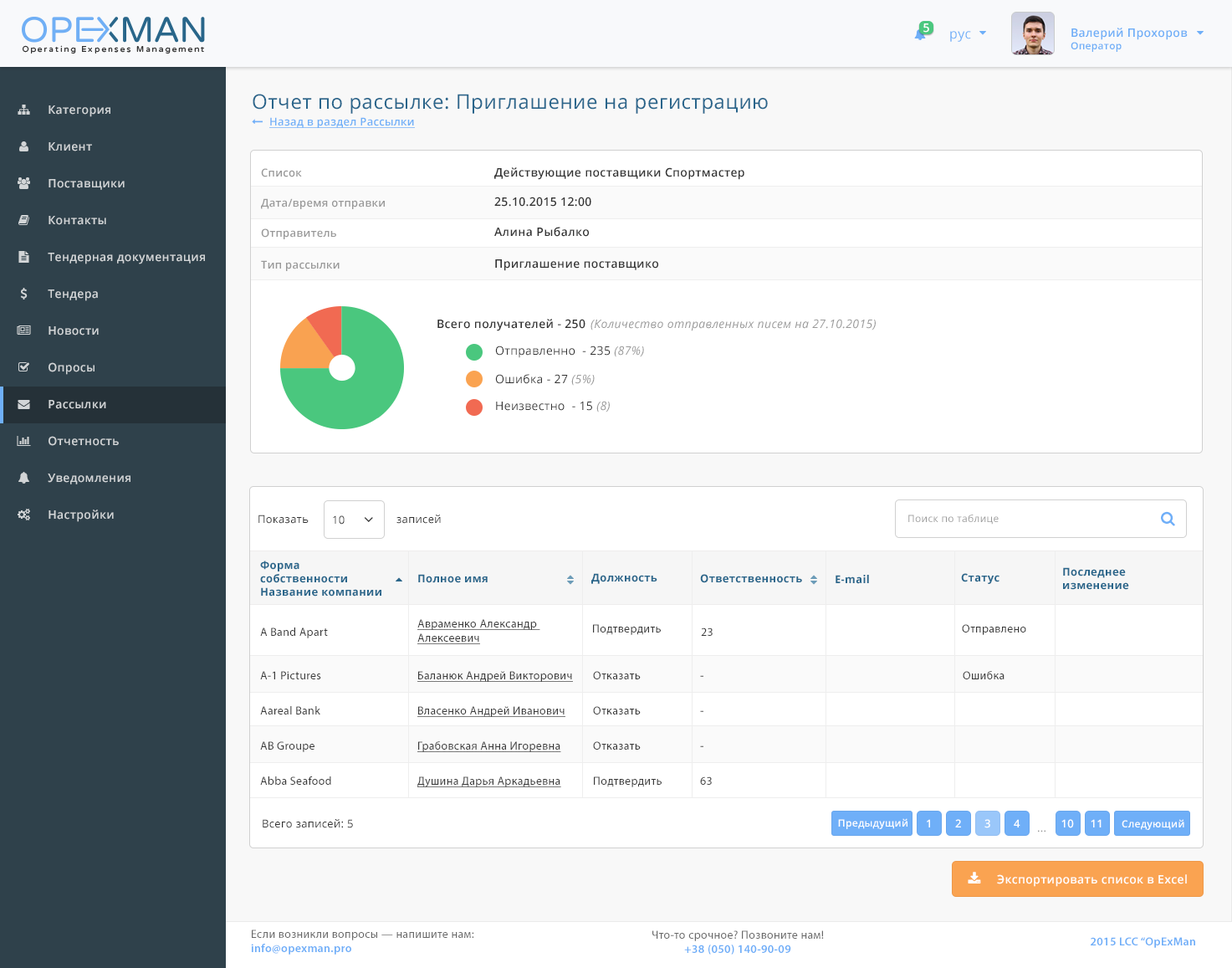
<style>
.page{position:relative;width:1232px;height:968px;background:#ffffff}
.page>*{position:absolute;margin:0}
.t1{font:11.7px "OpenSans-Semibold";letter-spacing:0.025em;color:#ffffff}
.t2{font:11.7px "OpenSans-Semibold";letter-spacing:0.025em;color:#6eaef7}
.t3{font:10px "OpenSans-Semibold";letter-spacing:0.025em;color:#6eaef7}
.t4{font:13.3px "OpenSans";letter-spacing:0.025em;color:#6eaff8}
.t5{font:20.1px "OpenSans";letter-spacing:0.025em;color:#29658b}
.t6{font:11.7px "OpenSans-Semibold";letter-spacing:0.025em;color:#d2d5d7}
.t7{font:10.9px "OpenSans-Semibold";letter-spacing:0.025em;color:#6faff8;text-decoration:underline}
.t8{font:10.9px "OpenSans-Semibold";letter-spacing:0.025em;color:#999999}
.t9{font:11.7px "OpenSans-Semibold";letter-spacing:0.025em;color:#333333}
.t10{font:11.7px "OpenSans-Italic";letter-spacing:0.025em;color:#999999}
.t11{font:11.7px "OpenSans";letter-spacing:0.025em;color:#333333}
.t12{font:10.9px "OpenSans";letter-spacing:0.025em;color:#333333}
.t13{font:10px "OpenSans";letter-spacing:0.025em;color:#999999}
.t14{font:10.9px "OpenSans-Bold";letter-spacing:0.025em;color:#29668b}
.t15{font:11.7px "MyriadPro-Regular";letter-spacing:0.025em;color:#3a3a3a}
.t16{font:11.7px "MyriadPro-Regular";letter-spacing:0.025em;color:#3a3a3a;text-decoration:underline}
.t17{font:11.7px "MyriadPro-Regular";letter-spacing:0.025em}
.t18{font:10px "OpenSans-Semibold";letter-spacing:0.025em;color:#ffffff}
.t19{font:10.8px "OpenSans-Semibold";letter-spacing:0.025em;color:#ffffff}
.t20{font:10.8px "OpenSans";letter-spacing:0.025em;color:#999999}
.t21{font:11.7px "MyriadPro-Regular";letter-spacing:0.025em;color:#696969}
.t22{font:11.7px "MyriadPro-Semibold";letter-spacing:0.025em;color:#6eaef8}
</style>
<div class="page">
<p class="t1" style="left:923px;top:23px;width:6px;height:10px">5</p>
<p class="t2" style="left:1071px;top:28px;width:117px;height:24px">Валерий Прохоров<br><span class="t3">Оператор</span></p>
<p class="t4" style="left:950px;top:31px;width:21px;height:11px">рус</p>
<p class="t5" style="left:253px;top:94px;width:515px;height:20px">Отчет по рассылке: Приглашение на регистрацию</p>
<p class="t6" style="left:49px;top:105px;width:61px;height:12px">Категория</p>
<p class="t7" style="left:269px;top:117px;width:146px;height:11px">Назад в раздел Рассылки</p>
<p class="t6" style="left:49px;top:142px;width:43px;height:9px">Клиент</p>
<p class="t8" style="left:261px;top:168px;width:41px;height:9px">Список</p>
<p class="t9" style="left:494px;top:167px;width:250px;height:13px">Действующие поставщики Спортмастер</p>
<p class="t6" style="left:49px;top:179px;width:76px;height:11px">Поставщики</p>
<p class="t9" style="left:494px;top:197px;width:97px;height:10px">25.10.2015 12:00</p>
<p class="t8" style="left:261px;top:198px;width:124px;height:11px">Дата/время отправки</p>
<p class="t6" style="left:49px;top:216px;width:57px;height:9px">Контакты</p>
<p class="t8" style="left:261px;top:228px;width:75px;height:11px">Отправитель</p>
<p class="t9" style="left:494px;top:227px;width:95px;height:10px">Алина Рыбалко</p>
<p class="t6" style="left:48px;top:253px;width:157px;height:11px">Тендерная документация</p>
<p class="t8" style="left:261px;top:260px;width:79px;height:11px">Тип рассылки</p>
<p class="t9" style="left:495px;top:259px;width:163px;height:12px">Приглашение поставщико</p>
<p class="t6" style="left:48px;top:289px;width:50px;height:12px">Тендера</p>
<p class="t6" style="left:49px;top:326px;width:50px;height:9px">Новости</p>
<p class="t9" style="left:437px;top:319px;width:149px;height:12px">Всего получателей - 250</p>
<p class="t10" style="left:591px;top:319px;width:285px;height:12px">(Количество отправленных писем на 27.10.2015)</p>
<p class="t11" style="left:495px;top:345px;width:149px;height:13px">Отправленно  - 235 <span class="t10">(87%)</span></p>
<p class="t6" style="left:49px;top:362px;width:46px;height:13px">Опросы</p>
<p class="t11" style="left:495px;top:374px;width:100px;height:12px">Ошибка - 27<span class="t10"> (5%)</span></p>
<p class="t6" style="left:49px;top:400px;width:57px;height:9px">Рассылки</p>
<p class="t11" style="left:496px;top:401px;width:114px;height:11px">Неизвестно  - 15 <span class="t10">(8)</span></p>
<p class="t6" style="left:49px;top:436px;width:70px;height:10px">Отчетность</p>
<p class="t6" style="left:48px;top:473px;width:82px;height:11px">Уведомления</p>
<p class="t6" style="left:49px;top:509px;width:65px;height:13px">Настройки</p>
<p class="t12" style="left:258px;top:514px;width:51px;height:10px">Показать</p>
<p class="t12" style="left:333px;top:515px;width:12px;height:9px">10</p>
<p class="t12" style="left:396px;top:514px;width:45px;height:10px">записей</p>
<p class="t13" style="left:908px;top:514px;width:91px;height:10px">Поиск по таблице</p>
<p class="t14" style="left:260px;top:560px;width:121px;height:36px">Форма <br>собственности<br>Название компании</p>
<p class="t14" style="left:1063px;top:567px;width:66px;height:23px">Последнее <br>изменение</p>
<p class="t14" style="left:418px;top:574px;width:70px;height:9px">Полное имя</p>
<p class="t14" style="left:591px;top:573px;width:66px;height:11px">Должность</p>
<p class="t14" style="left:700px;top:574px;width:102px;height:9px">Ответственность</p>
<p class="t14" style="left:836px;top:575px;width:33px;height:9px">E-mail</p>
<p class="t14" style="left:961px;top:573px;width:39px;height:11px">Статус</p>
<p class="t15" style="left:260px;top:627px;width:68px;height:11px">A Band Apart</p>
<p class="t16" style="left:417px;top:619px;width:123px;height:25px">Авраменко Александр <br>Алексеевич</p>
<p class="t15" style="left:593px;top:624px;width:68px;height:11px">Подтвердить</p>
<p class="t15" style="left:701px;top:627px;width:12px;height:9px">23</p>
<p class="t15" style="left:962px;top:624px;width:64px;height:11px">Отправлено</p>
<p class="t15" style="left:260px;top:671px;width:61px;height:8px">A-1 Pictures</p>
<p class="t16" style="left:417px;top:671px;width:156px;height:11px">Баланюк Андрей Викторович</p>
<p class="t15" style="left:593px;top:671px;width:48px;height:8px">Отказать</p>
<p class="t17" style="left:700px;top:675px;width:3px;height:2px">-</p>
<p class="t15" style="left:963px;top:671px;width:42px;height:8px">Ошибка</p>
<p class="t15" style="left:260px;top:706px;width:60px;height:8px">Aareal Bank</p>
<p class="t16" style="left:417px;top:706px;width:148px;height:11px">Власенко Андрей Иванович</p>
<p class="t15" style="left:593px;top:706px;width:48px;height:8px">Отказать</p>
<p class="t17" style="left:700px;top:710px;width:3px;height:2px">-</p>
<p class="t15" style="left:260px;top:741px;width:55px;height:11px">AB Groupe</p>
<p class="t16" style="left:417px;top:741px;width:144px;height:11px">Грабовская Анна Игоревна</p>
<p class="t15" style="left:593px;top:741px;width:48px;height:8px">Отказать</p>
<p class="t17" style="left:700px;top:745px;width:3px;height:2px">-</p>
<p class="t15" style="left:260px;top:776px;width:71px;height:9px">Abba Seafood</p>
<p class="t16" style="left:417px;top:776px;width:144px;height:11px">Душина Дарья Аркадьевна</p>
<p class="t15" style="left:594px;top:776px;width:68px;height:11px">Подтвердить</p>
<p class="t15" style="left:700px;top:776px;width:12px;height:9px">63</p>
<p class="t12" style="left:263px;top:819px;width:90px;height:9px">Всего записей: 5</p>
<p class="t18" style="left:838px;top:818px;width:70px;height:11px">Предыдущий</p>
<p class="t19" style="left:927px;top:819px;width:3px;height:8px">1</p>
<p class="t19" style="left:955px;top:819px;width:6px;height:8px">2</p>
<p class="t19" style="left:985px;top:819px;width:5px;height:9px">3</p>
<p class="t19" style="left:1014px;top:819px;width:6px;height:8px">4</p>
<p class="t19" style="left:1061px;top:819px;width:13px;height:9px">10</p>
<p class="t19" style="left:1091px;top:819px;width:11px;height:8px">11</p>
<p class="t18" style="left:1122px;top:819px;width:62px;height:11px">Следующий</p>
<p class="t20" style="left:1038px;top:830px;width:8px;height:2px">...</p>
<p class="t1" style="left:997px;top:874px;width:190px;height:13px">Экспортировать список в Excel</p>
<p class="t21" style="left:251px;top:929px;width:223px;height:25px">Если возникли вопросы — напишите нам:<br><span class="t22">info@opexman.pro</span></p>
<p class="t21" style="left:652px;top:930px;width:172px;height:24px;text-align:center">Что-то срочное? Позвоните нам!<br><span class="t22">+38 (050) 140-90-09</span></p>
<p class="t22" style="left:1091px;top:937px;width:104px;height:11px">2015 LCC “OpExMan</p>
</div>
